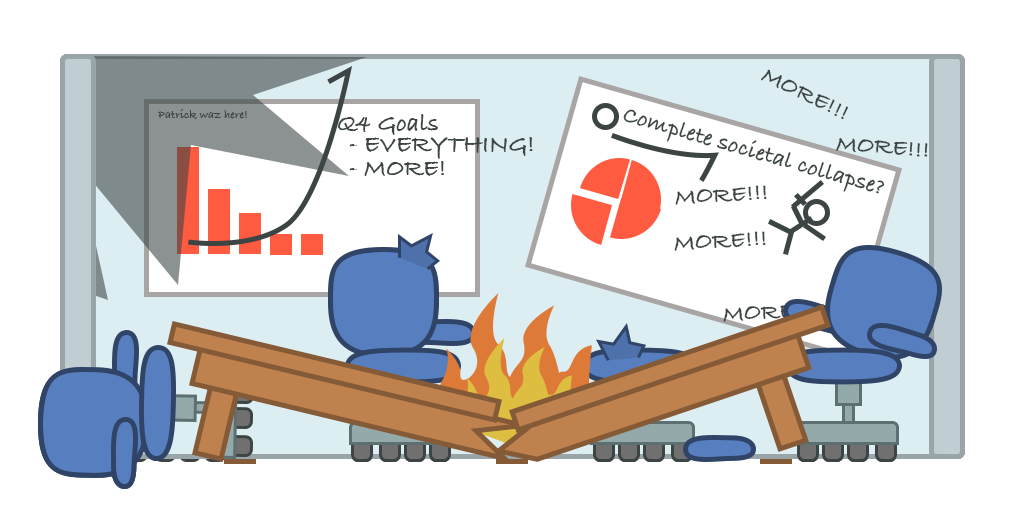
<style>
.page{position:relative;width:1024px;height:512px;background:#ffffff}
.page>*{position:absolute;margin:0}
.t1{font:24px "BradleyHandITCTT-Bold";color:#3c4444}
.t2{font:12px "BradleyHandITCTT-Bold";color:#3c4444}
.t3{font:25px "BradleyHandITCTT-Bold";color:#3c4444}
.t4{font:25px/24px "BradleyHandITCTT-Bold"}
.t5{font:25px/24px "BradleyHandITCTT-Bold";color:#3c4444}
</style>
<div class="page">
<p class="t1" style="left:761px;top:69px;width:87px;height:51px;rotate:26deg">MORE!!!</p>
<p class="t2" style="left:158px;top:109px;width:89px;height:10px">Patrick waz here!</p>
<p class="t2" style="left:158px;top:109px;width:89px;height:10px">Patrick waz here!</p>
<p class="t2" style="left:158px;top:109px;width:89px;height:10px">Patrick waz here!</p>
<p class="t1" style="left:623px;top:109px;width:262px;height:85px;rotate:16deg">Complete societal collapse?</p>
<p class="t3" style="left:338px;top:114px;width:100px;height:21px">Q4 Goals</p>
<p class="t3" style="left:338px;top:114px;width:100px;height:21px">Q4 Goals</p>
<p class="t3" style="left:338px;top:114px;width:100px;height:21px">Q4 Goals</p>
<p class="t4" style="left:349px;top:137px;width:111px;height:63px">- MORE<br>- MORE<br>- MORE!!!</p>
<p class="t5" style="left:349px;top:137px;width:184px;height:39px">- EVERYTHING!<br>- MORE!</p>
<p class="t1" style="left:836px;top:138px;width:92px;height:19px;rotate:4deg">MORE!!!</p>
<p class="t1" style="left:675px;top:185px;width:92px;height:20px;rotate:-3deg">MORE!!!</p>
<p class="t1" style="left:674px;top:231px;width:92px;height:20px;rotate:-3deg">MORE!!!</p>
<p class="t1" style="left:723px;top:302px;width:92px;height:20px;rotate:-3deg">MORE!!!</p>
</div>
